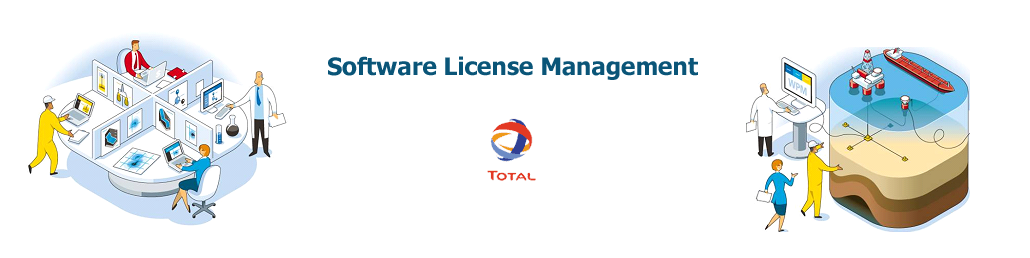
<style>
.page{position:relative;width:1030px;height:258px;background:#ffffff}
.page>*{position:absolute;margin:0}
.t1{font:24px "Tahoma-Bold";color:#0a5578}
</style>
<div class="page">
<p class="t1" style="left:327px;top:57px;width:427px;height:40px">Software License Management</p>
</div>
